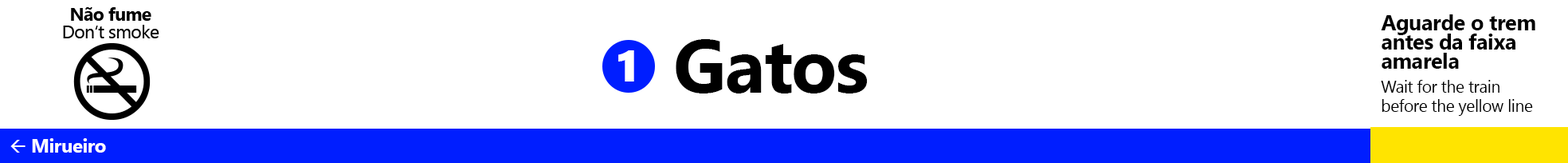
<style>
.page{position:relative;width:1568px;height:163px;background:#ffffff}
.page>*{position:absolute;margin:0}
.t1{font:37.2px/19.2px "SegoeUI-Bold";letter-spacing:-0.02em;color:#000000}
.t2{font:128.3px "SegoeUI-Bold";letter-spacing:-0.02em;color:#000000}
.t3{font:28.7px/19.2px "SegoeUI";letter-spacing:-0.02em;color:#000000}
.t4{font:32.7px "SegoeUI-Bold";letter-spacing:-0.02em;color:#ffffff}
</style>
<div class="page">
<p class="t1" style="left:1381px;top:14px;width:154px;height:55px">Aguarde o trem<br>antes da faixa <br>amarela</p>
<p class="t2" style="left:676px;top:39px;width:192px;height:54px">Gatos</p>
<p class="t3" style="left:1381px;top:80px;width:152px;height:36px">Wait for the train<br>before the yellow line</p>
<p class="t4" style="left:32px;top:138px;width:74px;height:14px">Mirueiro</p>
</div>
